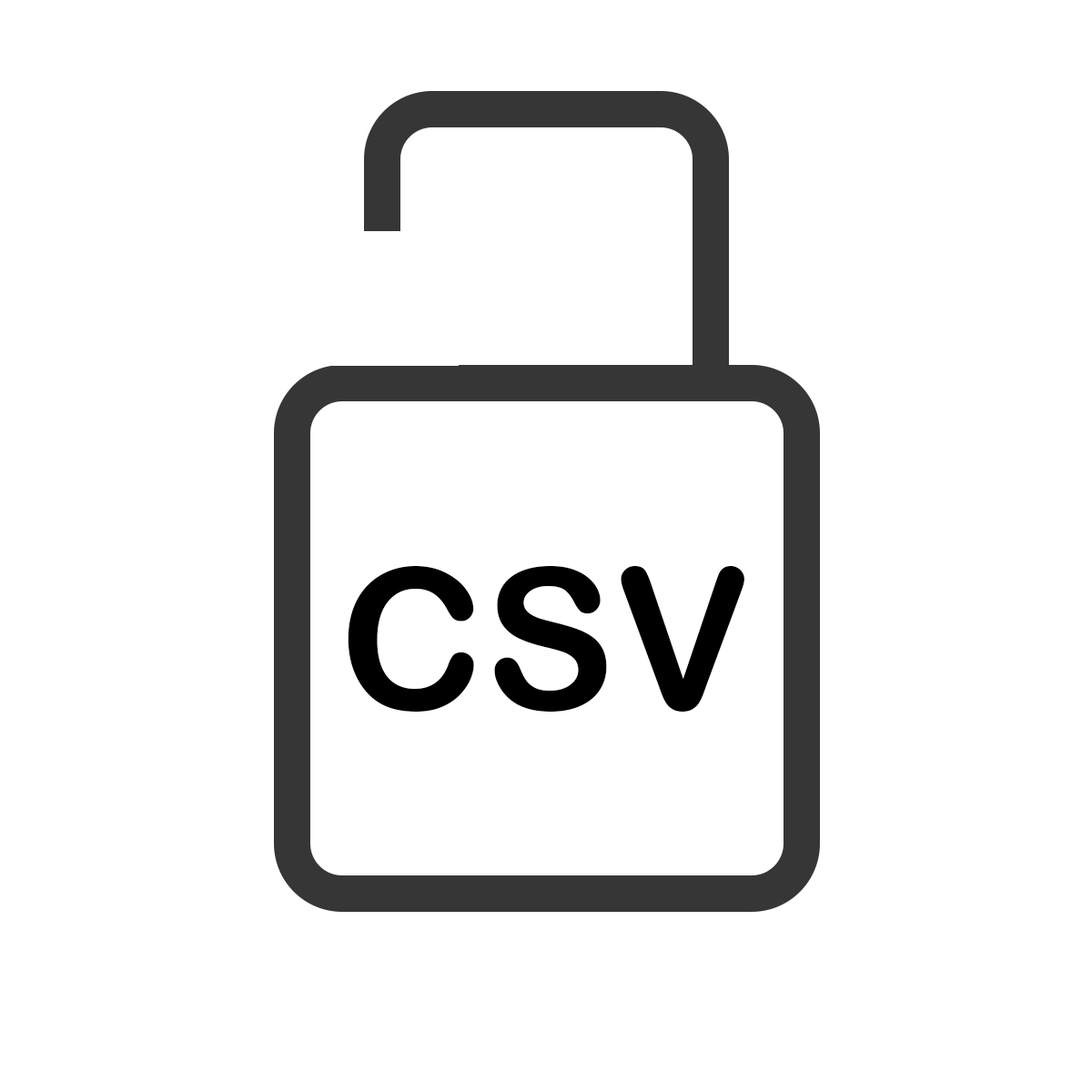
<style>
.page{position:relative;width:1092px;height:1092px;background:#ffffff}
.page>*{position:absolute;margin:0}
.t1{font:196.6px "ArialRoundedMTBold";color:#000000}
</style>
<div class="page">
<p class="t1" style="left:348px;top:566px;width:396px;height:146px">CSV</p>
</div>
